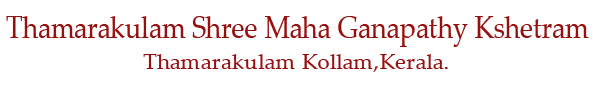
<style>
.page{position:relative;width:593px;height:94px;background:#ffffff}
.page>*{position:absolute;margin:0}
.t1{font:31.3px "PalatinoLinotype-Roman";color:#971010;scale:0.85 1}
.t2{font:21px "PalatinoLinotype-Roman";color:#971010;scale:1.05 1}
</style>
<div class="page">
<p class="t1" style="left:6px;top:16px;width:583px;height:31px">Thamarakulam Shree Maha Ganapathy Kshetram</p>
<p class="t2" style="left:143px;top:54px;width:305px;height:18px">Thamarakulam Kollam,Kerala.</p>
</div>
